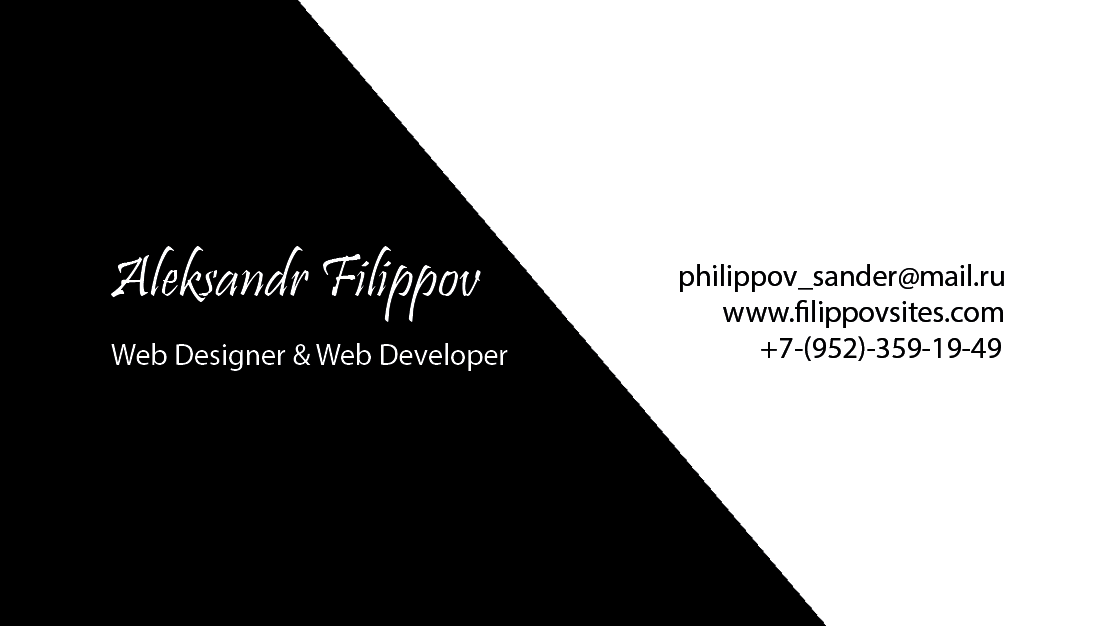
<style>
.page{position:relative;width:1110px;height:626px;background:#000000}
.page>*{position:absolute;margin:0}
.t1{font:60px "Pristina-Regular";color:#ffffff}
.t2{font:30px "MyriadPro-Regular";color:#000000}
.t3{font:30px "MyriadPro-Regular";color:#ffffff}
</style>
<div class="page">
<p class="t1" style="left:111px;top:246px;width:370px;height:76px">Aleksandr Filippov</p>
<p class="t2" style="left:680px;top:264px;width:324px;height:97px">philippov_sander@mail.ru<br>          www.filippovsites.com<br>                +7-(952)-359-19-49</p>
<p class="t3" style="left:111px;top:343px;width:397px;height:28px">Web Designer &amp; Web Developer</p>
</div>
